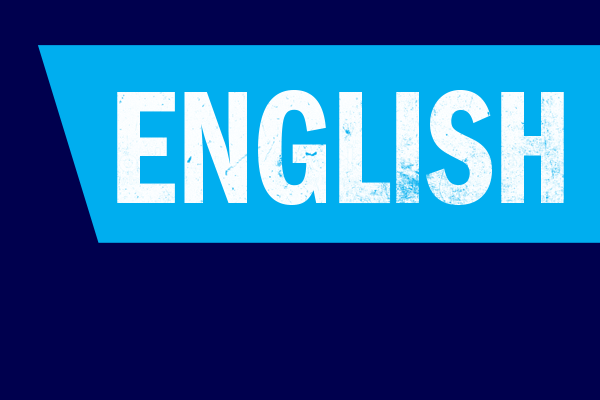
<style>
.page{position:relative;width:600px;height:400px;background:#00004e}
.page>*{position:absolute;margin:0}
.t1{font:166px "ITCFranklinGothicStd-DmCp";letter-spacing:-0.01em;color:#ffffff}
</style>
<div class="page">
<p class="t1" style="left:117px;top:89px;width:447px;height:117px">ENGLISH</p>
</div>
